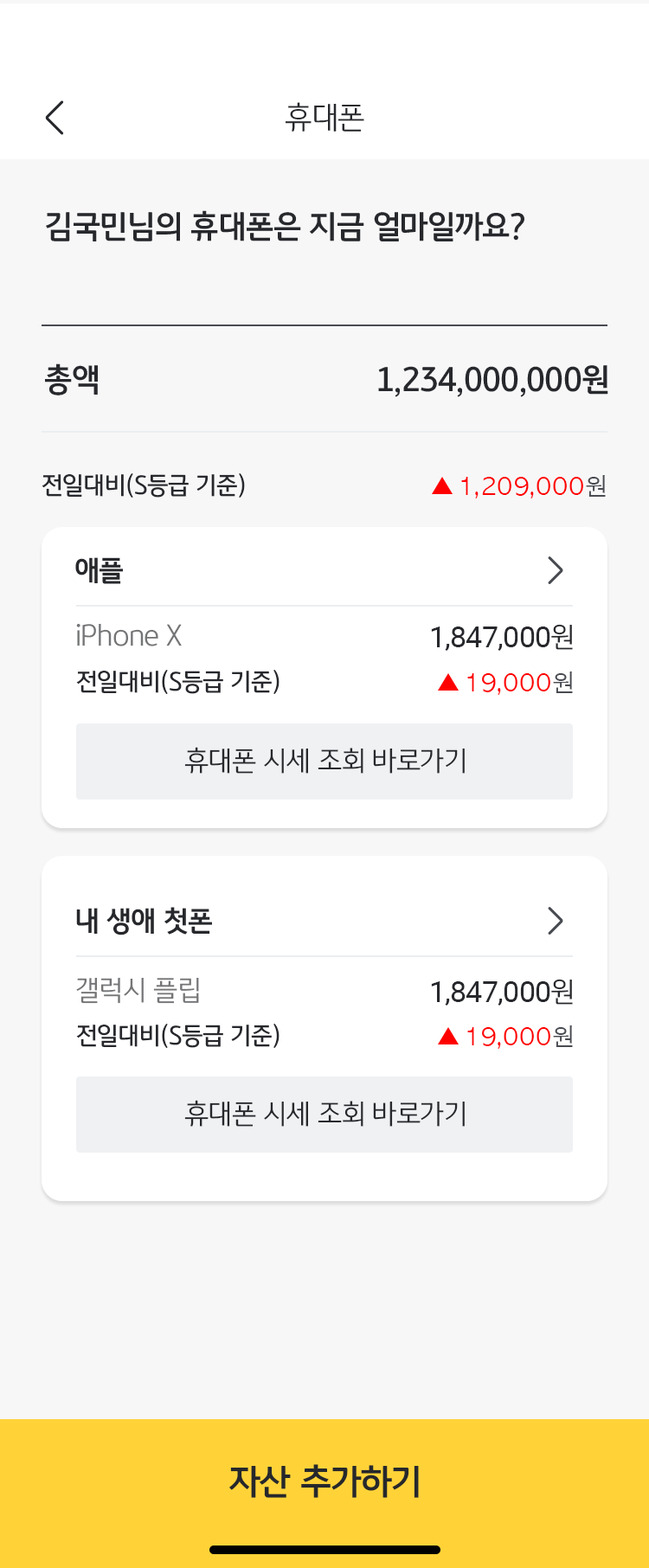
<style>
.page{position:relative;width:649px;height:1568px;background:#f7f7f8}
.page>*{position:absolute;margin:0}
.t1{font:31.2px "KBFGText-Light";letter-spacing:-0.02em;color:#26282c}
.t2{font:31.2px "KBFGText-Bold";letter-spacing:-0.02em;color:#26282c}
.t3{font:24.2px "KBFGText-Medium";letter-spacing:-0.01em;color:#26282c}
.t4{font:24.2px "AppleGothic";letter-spacing:-0.01em;color:#ff0000}
.t5{font:24.2px "AppleGothic";letter-spacing:-0.01em;color:#484b51}
.t6{font:27.7px "KBFGText-Bold";letter-spacing:-0.02em;color:#26282c}
.t7{font:27.7px "KBFGText-Light";letter-spacing:-0.02em;color:#747577}
.t8{font:29.4px "Roboto-Regular";letter-spacing:-0.02em;color:#26282c}
.t9{font:27.7px "KBFGText-Light";letter-spacing:-0.02em;color:#26282c}
.t10{font:34.6px "KBFGText-Bold";letter-spacing:-0.02em;color:#26282c}
</style>
<div class="page">
<p class="t1" style="left:286px;top:102px;width:78px;height:30px">휴대폰</p>
<p class="t2" style="left:46px;top:210px;width:478px;height:31px">김국민님의 휴대폰은 지금 얼마일까요?</p>
<p class="t2" style="left:45px;top:363px;width:53px;height:32px">총액</p>
<p class="t2" style="left:378px;top:365px;width:230px;height:32px">1,234,000,000원</p>
<p class="t3" style="left:42px;top:473px;width:203px;height:25px">전일대비(S등급 기준)</p>
<p class="t4" style="left:461px;top:475px;width:145px;height:23px">1,209,000<span class="t5">원</span></p>
<p class="t6" style="left:75px;top:557px;width:48px;height:27px">애플</p>
<p class="t7" style="left:76px;top:623px;width:106px;height:23px">iPhone X</p>
<p class="t8" style="left:431px;top:624px;width:142px;height:27px">1,847,000<span class="t9">원</span></p>
<p class="t3" style="left:76px;top:670px;width:204px;height:24px">전일대비(S등급 기준)</p>
<p class="t4" style="left:467px;top:672px;width:106px;height:23px">19,000<span class="t5">원</span></p>
<p class="t9" style="left:184px;top:747px;width:281px;height:27px">휴대폰 시세 조회 바로가기</p>
<p class="t6" style="left:76px;top:907px;width:136px;height:28px">내 생애 첫폰</p>
<p class="t7" style="left:76px;top:978px;width:123px;height:26px">갤럭시 플립</p>
<p class="t8" style="left:431px;top:979px;width:142px;height:27px">1,847,000<span class="t9">원</span></p>
<p class="t3" style="left:76px;top:1024px;width:204px;height:24px">전일대비(S등급 기준)</p>
<p class="t4" style="left:467px;top:1025px;width:106px;height:24px">19,000<span class="t5">원</span></p>
<p class="t9" style="left:184px;top:1100px;width:281px;height:27px">휴대폰 시세 조회 바로가기</p>
<p class="t10" style="left:229px;top:1464px;width:190px;height:34px">자산 추가하기</p>
</div>
